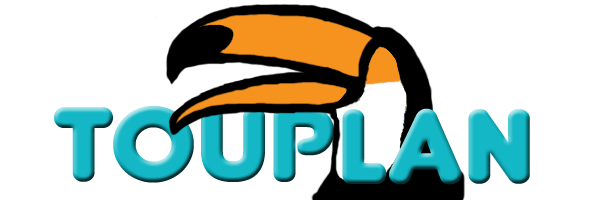
<style>
.page{position:relative;width:600px;height:200px;background:#ffffff}
.page>*{position:absolute;margin:0}
.t1{font:125px "Junegull";color:#13b7c5;scale:1.06 1}
</style>
<div class="page">
<p class="t1" style="left:54px;top:106px;width:280px;height:77px">TOUP</p>
<p class="t1" style="left:342px;top:108px;width:188px;height:77px">LAN</p>
</div>
